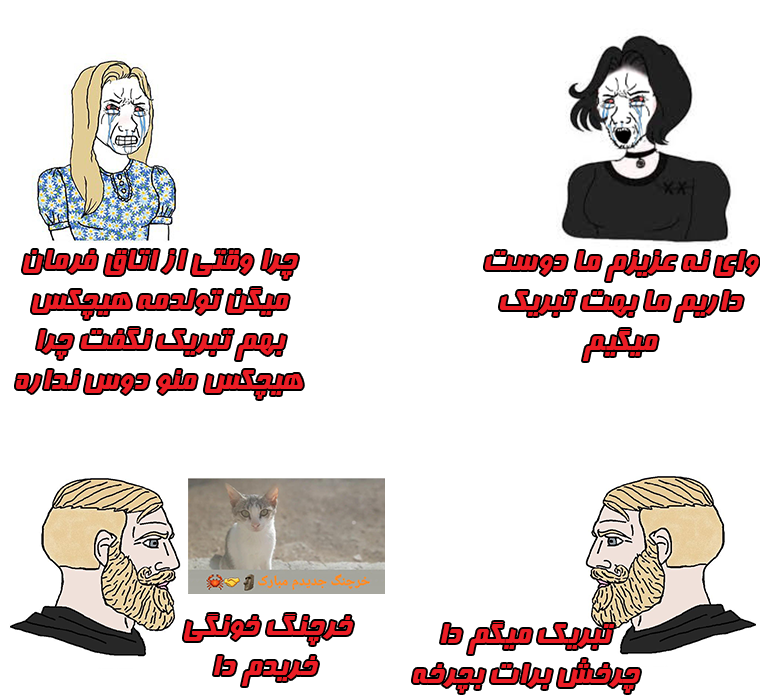
<style>
.page{position:relative;width:760px;height:700px;background:#ffffff}
.page>*{position:absolute;margin:0}
.t1{font:33.3px "Far.Farnaz";color:#ec1d25}
</style>
<div class="page">
<p class="t1" style="left:16px;top:250px;width:287px;height:149px;text-align:center">چرا وقتی از اتاق فرمان میگن تولدمه هیچکس بهم تبریک نگفت چرا هیچکس منو دوس نداره</p>
<p class="t1" style="left:485px;top:251px;width:274px;height:110px;text-align:center">وای نه عزیزم ما دوست داریم ما بهت تبریک میگیم</p>
<p class="t1" style="left:184px;top:614px;width:169px;height:72px;text-align:center">خرچنگ خونگی<br> خریدم دا</p>
<p class="t1" style="left:413px;top:622px;width:227px;height:71px;text-align:center">تبریک میگم دا<br>چرخش برات بچرخه</p>
</div>
